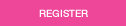
<style>
.page{position:relative;width:126px;height:26px;background:#ee4799}
.page>*{position:absolute;margin:0}
.t1{font:10px "HelveticaNeue-Medium";color:#ffffff}
</style>
<div class="page">
<p class="t1" style="left:39px;top:9px;width:49px;height:8px">REGISTER</p>
</div>
